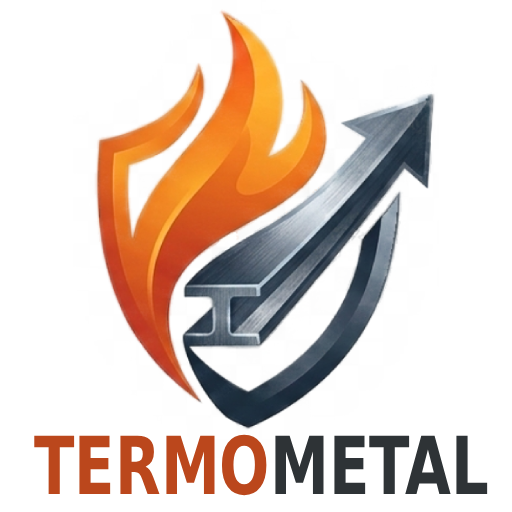
<style>
.page{position:relative;width:512px;height:512px;background:#ffffff}
.page>*{position:absolute;margin:0}
.t1{font:79.8px "DejaVuSans-Bold";color:#bb471c;scale:0.74 1}
.t2{font:79.8px "DejaVuSans-Bold";color:#2e3336;scale:0.74 1}
</style>
<div class="page">
<p class="t1" style="left:34px;top:434px;width:454px;height:62px">TERMO<span class="t2">METAL</span></p>
</div>
